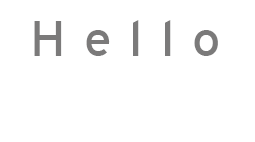
<style>
.page{position:relative;width:255px;height:142px;background:#ffffff}
.page>*{position:absolute;margin:0}
.t1{font:50px "EYInterstate-Regular";letter-spacing:0.36em;color:#7b7a7a}
</style>
<div class="page">
<p class="t1" style="left:34px;top:20px;width:184px;height:36px">Hello</p>
</div>
